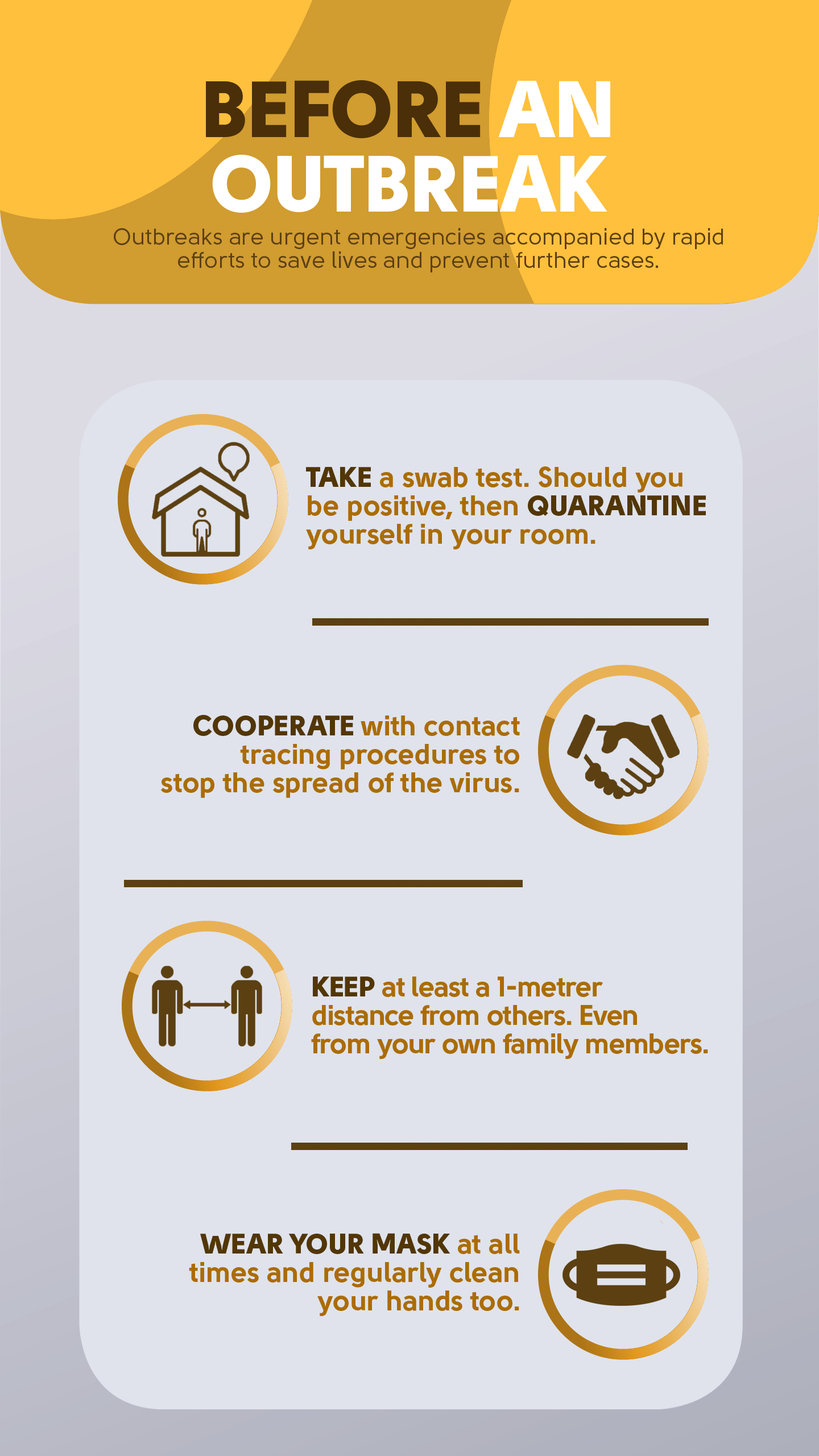
<style>
.page{position:relative;width:819px;height:1456px;background:#e0e3ec}
.page>*{position:absolute;margin:0}
.t1{font:79.6px/74.5px "Solomon-Sans-Black";color:#ffffff}
.t2{font:79.6px/74.5px "Solomon-Sans-Black";color:#4a2f08}
.t3{font:22.7px/23.3px "Solomon-Sans-Normal";color:#5c4012}
.t4{font:28.4px/28.4px "Solomon-Sans-Bold";color:#ab6c03}
.t5{font:28.4px/28.4px "Solomon-Sans-Black";color:#523606}
.t6{font:28.4px/28.4px "Solomon-Sans-Bold";letter-spacing:-0.025em;color:#ab6c03}
.t7{font:28.4px/28.4px "Solomon-Sans-Black";letter-spacing:-0.025em;color:#523606}
</style>
<div class="page">
<p class="t1" style="left:206px;top:80px;width:404px;height:133px;text-align:center"><span class="t2">BEFORE</span> AN<br>OUTBREAK</p>
<p class="t3" style="left:114px;top:228px;width:609px;height:44px;text-align:center">Outbreaks are urgent emergencies accompanied by rapid<br>efforts to save lives and prevent further cases.</p>
<p class="t4" style="left:306px;top:466px;width:400px;height:83px"><span class="t5">TAKE </span>a swab test. Should you<br>be positive, then <span class="t5">QUARANTINE<br></span>yourself in your room.</p>
<p class="t4" style="left:161px;top:715px;width:359px;height:83px;text-align:right"><span class="t5">COOPERATE </span>with contact<br>tracing procedures to<br>stop the spread of the virus.</p>
<p class="t6" style="left:311px;top:977px;width:397px;height:82px"><span class="t7">KEEP </span>at least a 1-metrer<br>distance from others. Even<br>from your own family members.</p>
<p class="t4" style="left:189px;top:1233px;width:331px;height:83px;text-align:right"><span class="t5">WEAR YOUR MASK </span>at all<br>times and regularly clean<br>your hands too.</p>
</div>
